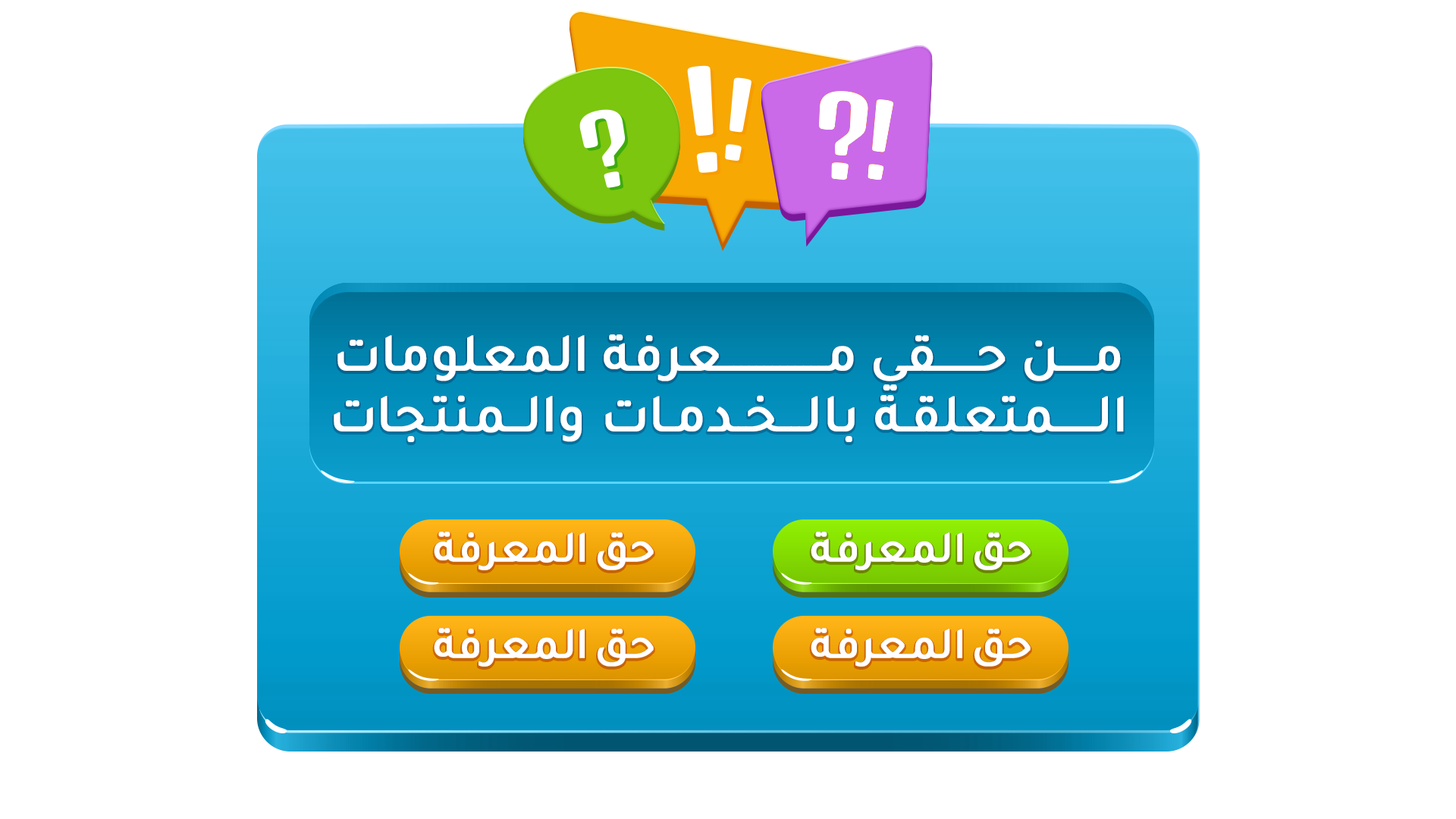
<style>
.page{position:relative;width:1456px;height:819px;background:#ffffff}
.page>*{position:absolute;margin:0}
.t1{font:53.7px/60px "BoutrosMBCDinkum-Medium";letter-spacing:-0.005em;color:#ffffff;font-weight:bold}
.t2{font:53.7px/60px "BoutrosMBCDinkum-Medium";color:#ffffff;font-weight:bold}
.t3{font:44.3px "BoutrosMBCDinkum-Medium";letter-spacing:-0.02em;color:#ffffff;font-weight:bold}
</style>
<div class="page">
<p class="t1" style="left:334px;top:334px;width:790px;height:108px;text-align:center"><span class="t2">مــــن حـــــقي </span>مـــــــــــــعرفة <span class="t2">المعلومات<br></span><span class="t2">الـــــمتعلقـة </span><span class="t2">بالـــخـدمـات </span><span class="t2">والــمنتجات</span></p>
<p class="t3" style="left:434px;top:532px;width:220px;height:38px">حق المعرفة</p>
<p class="t3" style="left:811px;top:532px;width:220px;height:38px">حق المعرفة</p>
<p class="t3" style="left:434px;top:628px;width:220px;height:39px">حق المعرفة</p>
<p class="t3" style="left:811px;top:628px;width:220px;height:39px">حق المعرفة</p>
</div>
